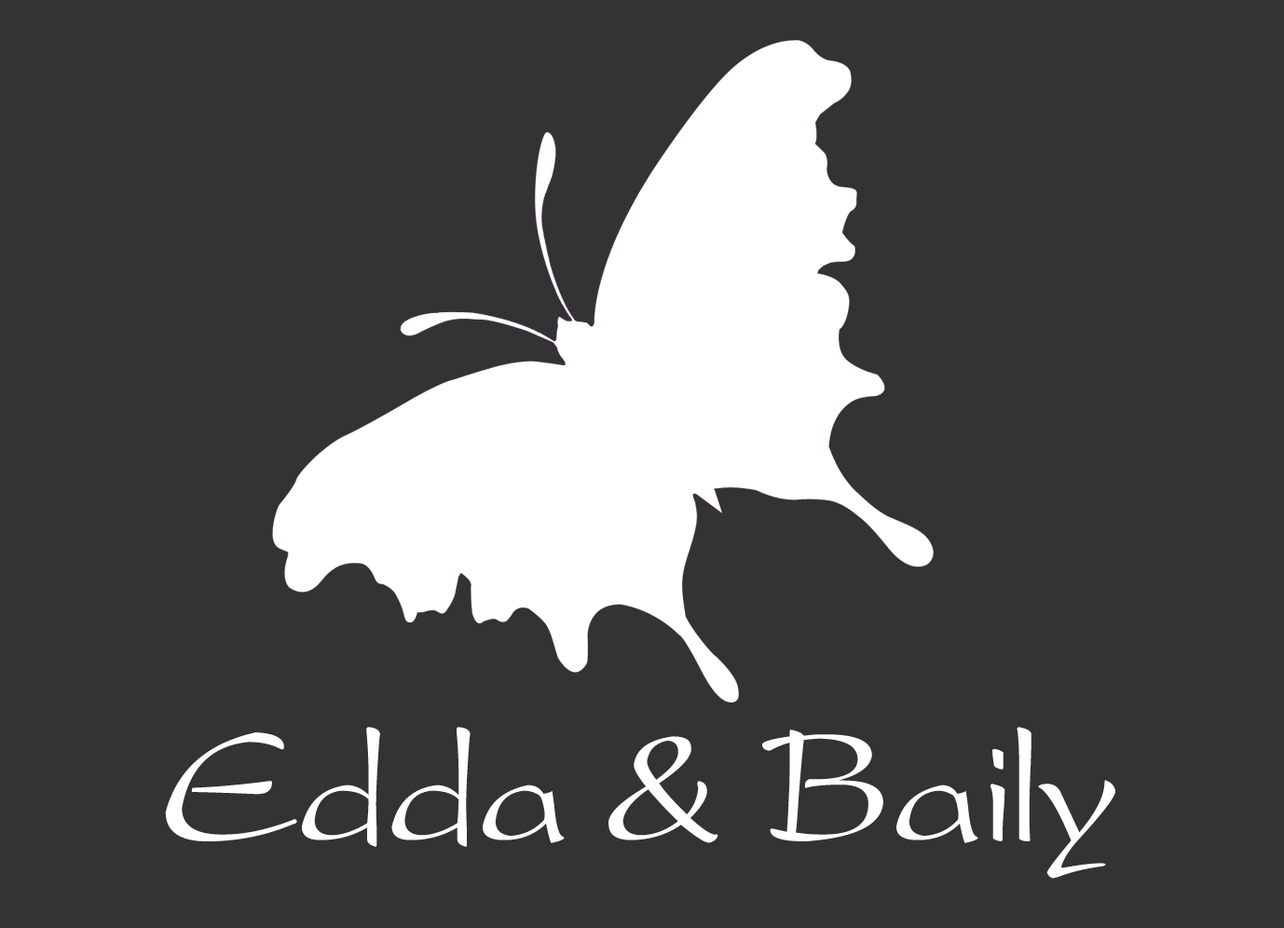
<style>
.page{position:relative;width:1284px;height:928px;background:#333333}
.page>*{position:absolute;margin:0}
.t1{font:170.9px "FZGLFW--GB1-0";color:#ffffff}
</style>
<div class="page">
<p class="t1" style="left:165px;top:727px;width:951px;height:152px">Edda &amp; Baily</p>
</div>
